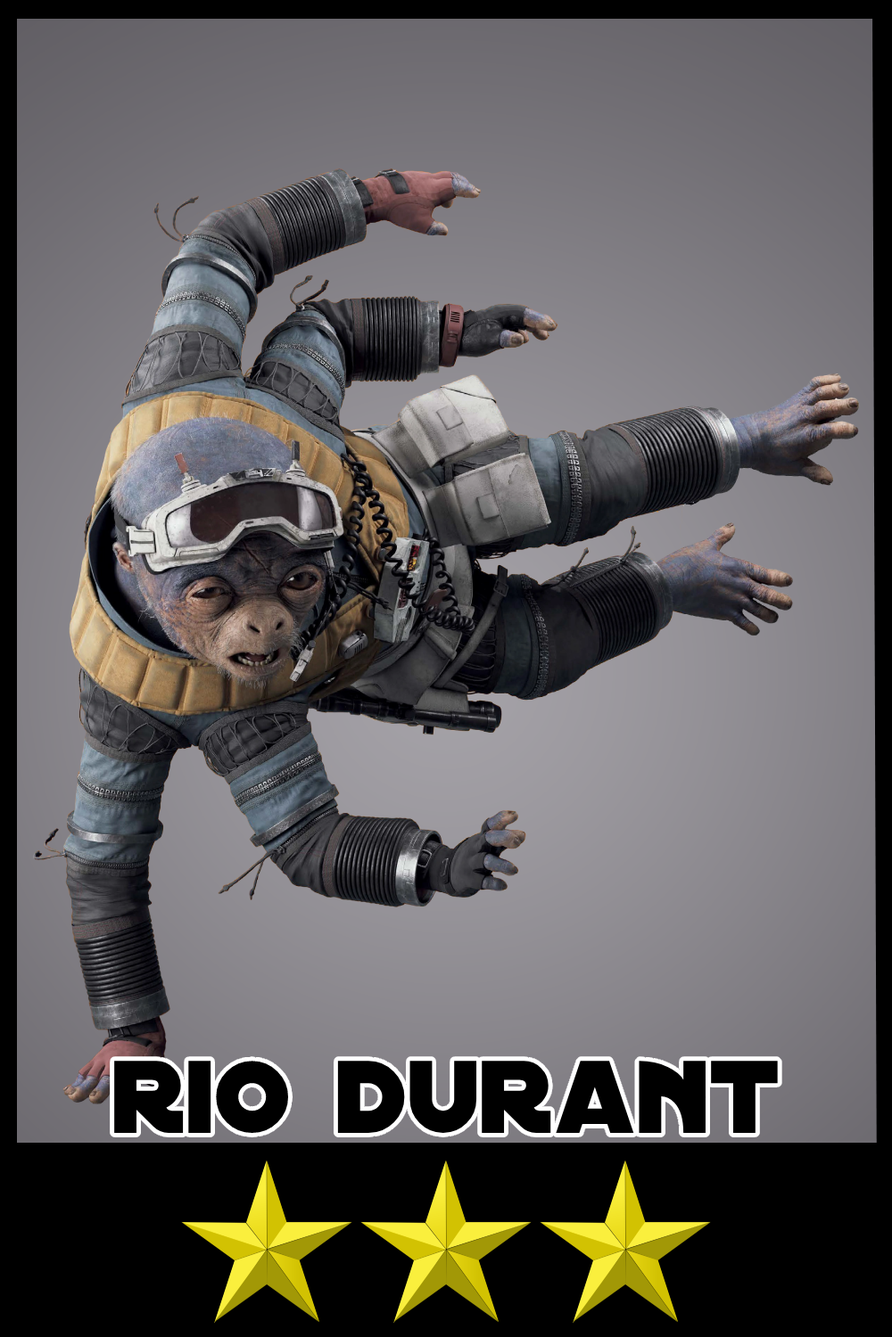
<style>
.page{position:relative;width:892px;height:1337px}
.page>*{position:absolute;margin:0}
.t1{font:110.7px "DistantGalaxy";color:#000000}
</style>
<div class="page">
<p class="t1" style="left:114px;top:1061px;width:663px;height:72px">rio durant</p>
</div>
